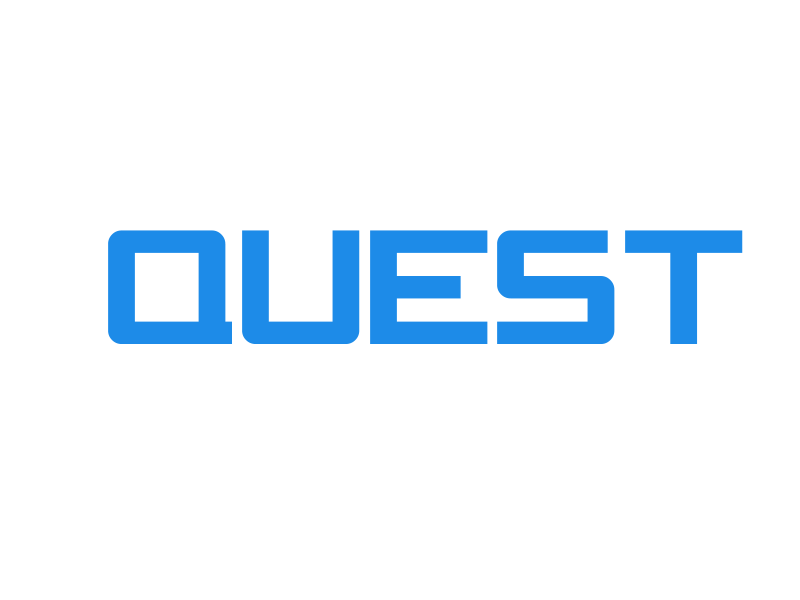
<style>
.page{position:relative;width:800px;height:600px;background:#ffffff}
.page>*{position:absolute;margin:0}
.t1{font:150px "CafeNeroM54";color:#1d8be8}
</style>
<div class="page">
<p class="t1" style="left:108px;top:230px;width:635px;height:114px">quest</p>
</div>
